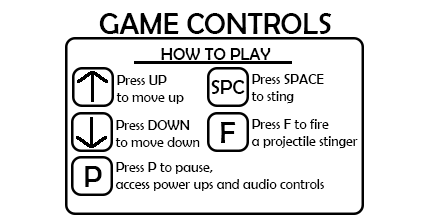
<style>
.page{position:relative;width:432px;height:216px;background:#ffffff}
.page>*{position:absolute;margin:0}
.t1{font:30px "BerlinSansFB-Reg";color:#000000}
.t2{font:17px "BerlinSansFB-Reg";color:#000000}
.t3{font:14px "BerlinSansFB-Reg";color:#000000}
.t4{font:20px "BerlinSansFB-Reg";color:#000000}
</style>
<div class="page">
<p class="t1" style="left:99px;top:13px;width:233px;height:21px">GAME CONTROLS</p>
<p class="t2" style="left:161px;top:48px;width:110px;height:12px">HOW TO PLAY</p>
<p class="t3" style="left:116px;top:75px;width:68px;height:29px">Press UP <br>to move up</p>
<p class="t3" style="left:251px;top:74px;width:73px;height:30px">Press SPACE<br>to sting</p>
<p class="t4" style="left:211px;top:80px;width:34px;height:14px">SPC</p>
<p class="t3" style="left:115px;top:120px;width:85px;height:27px">Press DOWN <br>to move down</p>
<p class="t1" style="left:221px;top:122px;width:15px;height:21px">F</p>
<p class="t3" style="left:251px;top:119px;width:107px;height:30px">Press F to fire <br>a projectile stinger</p>
<p class="t1" style="left:85px;top:166px;width:17px;height:21px">P</p>
<p class="t3" style="left:115px;top:162px;width:209px;height:29px">Press P to pause,<br>access power ups and audio controls</p>
</div>
